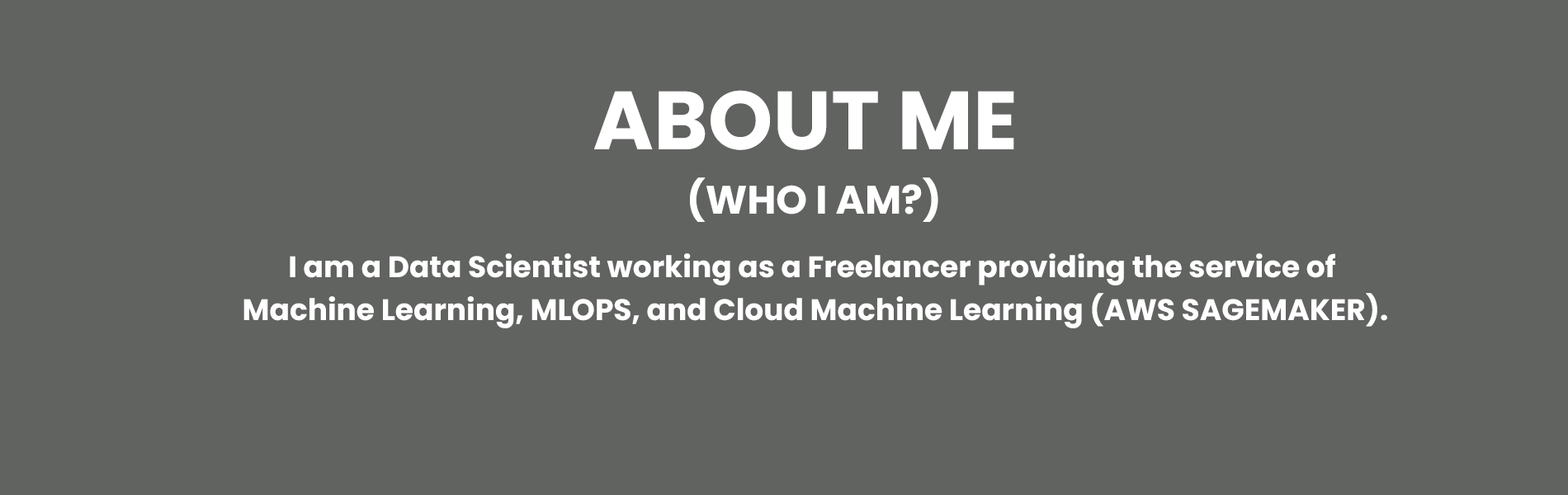
<style>
.page{position:relative;width:1568px;height:495px;background:#616360}
.page>*{position:absolute;margin:0}
.t1{font:39.6px/21.5px "Poppins-Bold";color:#ffffff}
.t2{font:82.5px/21.5px "Poppins-Bold";color:#ffffff}
.t3{font:29.7px/21.5px "Poppins-Bold";color:#ffffff}
</style>
<div class="page">
<p class="t1" style="left:594px;top:90px;width:420px;height:132px;text-align:center"><span class="t2">ABOUT ME <br></span><br><br>(WHO I AM?)</p>
<p class="t3" style="left:243px;top:253px;width:1144px;height:75px;text-align:center">I am a Data Scientist working as a Freelancer providing the service of <br><br>Machine Learning, MLOPS, and Cloud Machine Learning (AWS SAGEMAKER).</p>
</div>
